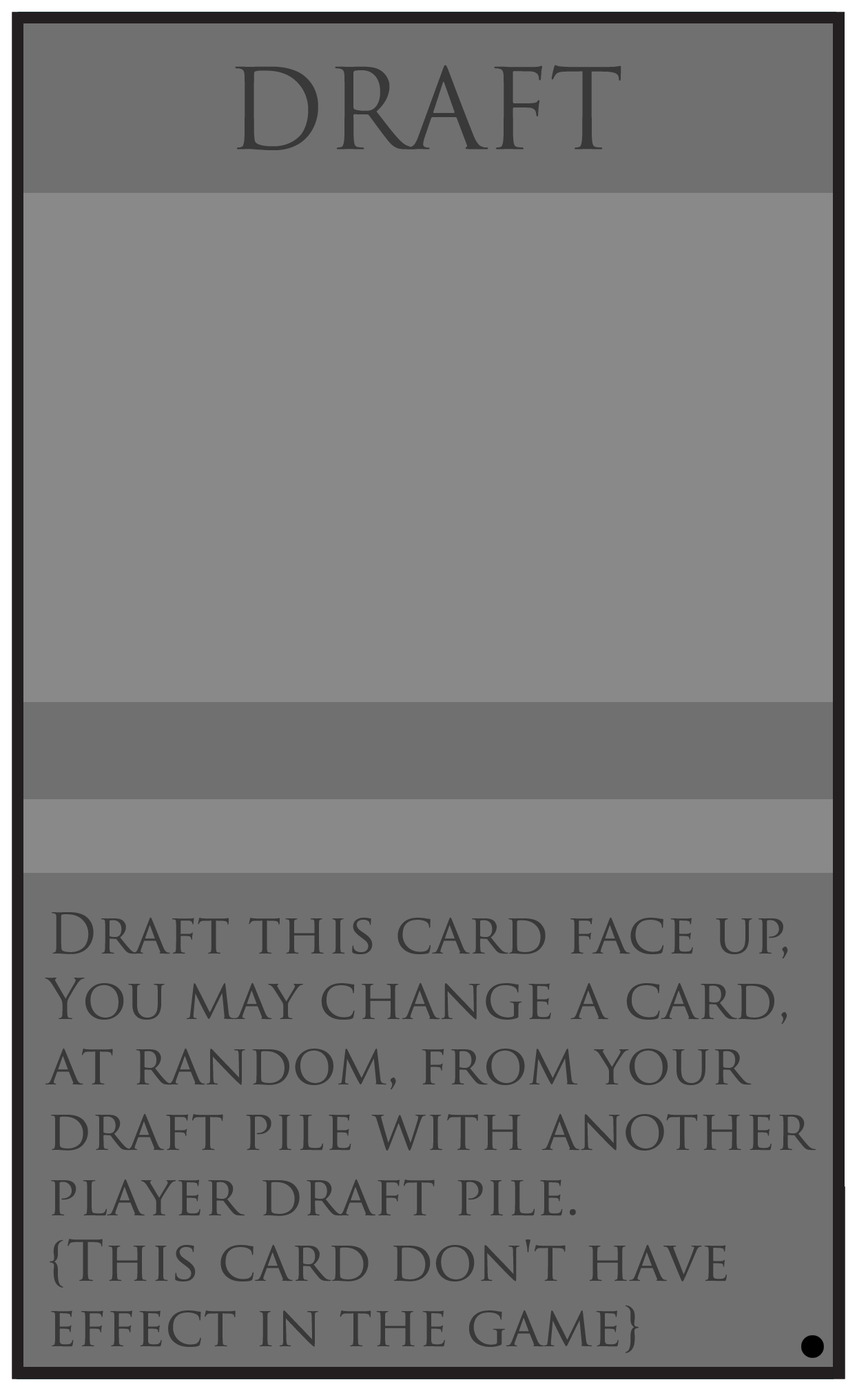
<style>
.page{position:relative;width:857px;height:1391px;background:#707070}
.page>*{position:absolute;margin:0}
.t1{font:109.1px "TrajanPro-Regular";color:#393939}
.t2{font:54.5px "TrajanPro-Regular";color:#393939}
</style>
<div class="page">
<p class="t1" style="left:235px;top:65px;width:387px;height:85px">DRAFT</p>
<p class="t2" style="left:45px;top:912px;width:772px;height:441px">Draft this card face up, <br>You may change a card, <br>at random, from your <br>draft pile with another<br>player draft pile.<br>{This card don't have  <br>effect in the game}</p>
</div>
